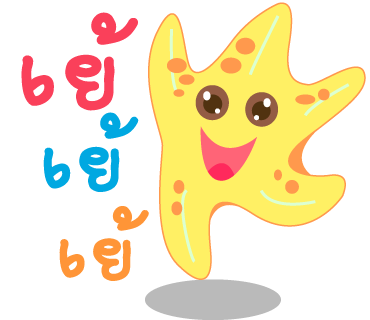
<style>
.page{position:relative;width:370px;height:320px;background:#ffffff}
.page>*{position:absolute;margin:0}
.t1{font:154px "2005_iannnnnMTV";letter-spacing:0.03em;color:#fa405a;scale:1.06 1}
.t2{font:125px "2005_iannnnnMTV";letter-spacing:0.03em;color:#00a8e1;scale:1.06 1}
.t3{font:118px "2005_iannnnnMTV";letter-spacing:0.03em;color:#ff9537;scale:1.06 1}
</style>
<div class="page">
<p class="t1" style="left:21px;top:12px;width:117px;height:99px">เย้</p>
<p class="t2" style="left:43px;top:112px;width:96px;height:80px">เย้</p>
<p class="t3" style="left:59px;top:206px;width:90px;height:75px">เย้</p>
</div>
